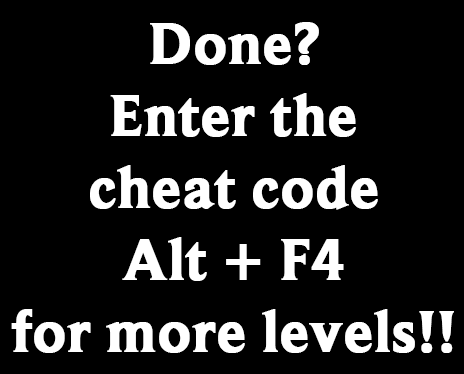
<style>
.page{position:relative;width:464px;height:374px;background:#000000}
.page>*{position:absolute;margin:0}
.t1{font:60px "BeaufortforLOL-Bold";color:#ffffff;font-weight:bold}
</style>
<div class="page">
<p class="t1" style="left:11px;top:22px;width:443px;height:331px;text-align:center">Done?<br>Enter the<br>cheat code<br>Alt + F4<br>for more levels!!</p>
</div>
